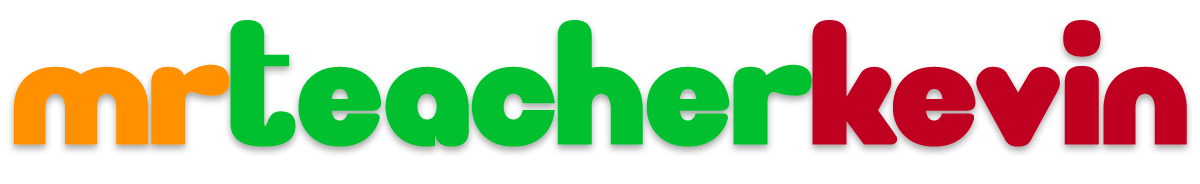
<style>
.page{position:relative;width:1200px;height:184px;background:#ffffff}
.page>*{position:absolute;margin:0}
.t1{font:158.3px "Mignone";color:#00c030}
.t2{font:158.3px "Mignone";color:#ff9100}
.t3{font:158.3px "Mignone";color:#bf0020}
</style>
<div class="page">
<p class="t1" style="left:13px;top:20px;width:1174px;height:127px"><span class="t2">mr</span>teacher<span class="t3">kevin</span></p>
</div>
